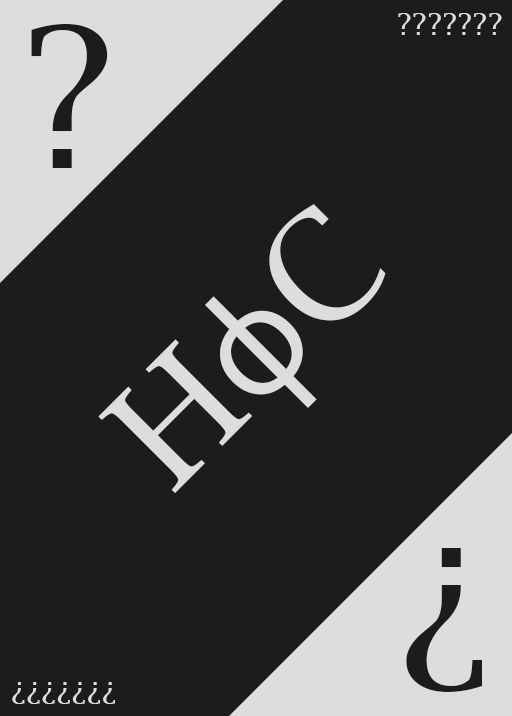
<style>
.page{position:relative;width:512px;height:716px;background:#1c1c1e}
.page>*{position:absolute;margin:0}
.t1{font:30px "LucidaFax";color:#dddddd}
.t2{font:194.9px "LucidaBright";color:#1c1c1e}
.t3{font:150px "LucidaBright";color:#dddddd}
.t4{font:150px "SegoeUI";color:#dddddd}
</style>
<div class="page">
<p class="t1" style="left:398px;top:13px;width:104px;height:22px">???????</p>
<p class="t2" style="left:31px;top:24px;width:77px;height:144px">?</p>
<p class="t3" style="left:98px;top:204px;width:288px;height:289px;rotate:-45deg">H<span class="t4">ɸ</span>C</p>
<p class="t2" style="left:406px;top:548px;width:76px;height:144px;rotate:180deg">?</p>
<p class="t1" style="left:12px;top:682px;width:103px;height:22px;rotate:180deg">???????</p>
</div>
